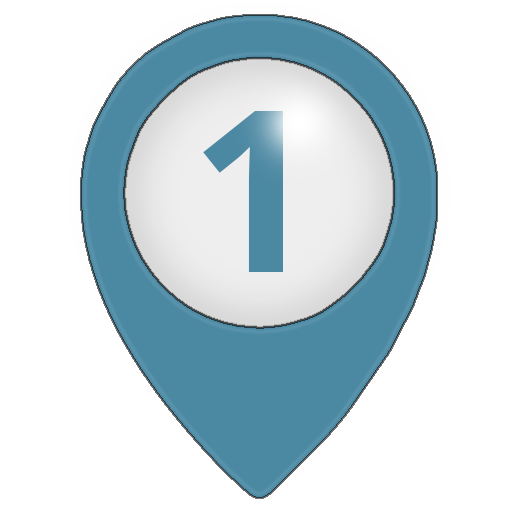
<style>
.page{position:relative;width:512px;height:512px;background:#ffffff}
.page>*{position:absolute;margin:0}
.t1{font:225px "OpenSans-Bold";letter-spacing:0.04em;color:#4b88a2}
</style>
<div class="page">
<p class="t1" style="left:203px;top:111px;width:80px;height:161px">1</p>
</div>
